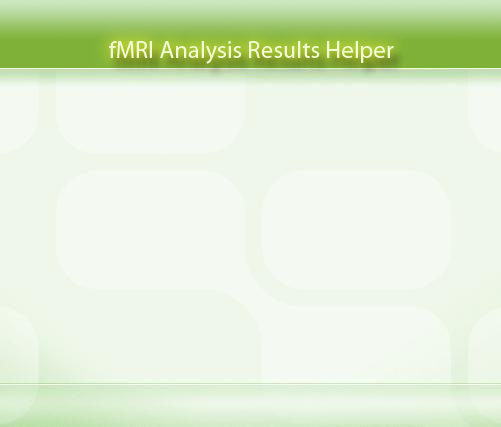
<style>
.page{position:relative;width:501px;height:427px;background:#f4f9f2}
.page>*{position:absolute;margin:0}
.t1{font:24px "MyriadPro-Regular";letter-spacing:0.01em;color:#f3fcd7}
</style>
<div class="page">
<p class="t1" style="left:109px;top:41px;width:285px;height:23px">fMRI Analysis Results Helper</p>
</div>
